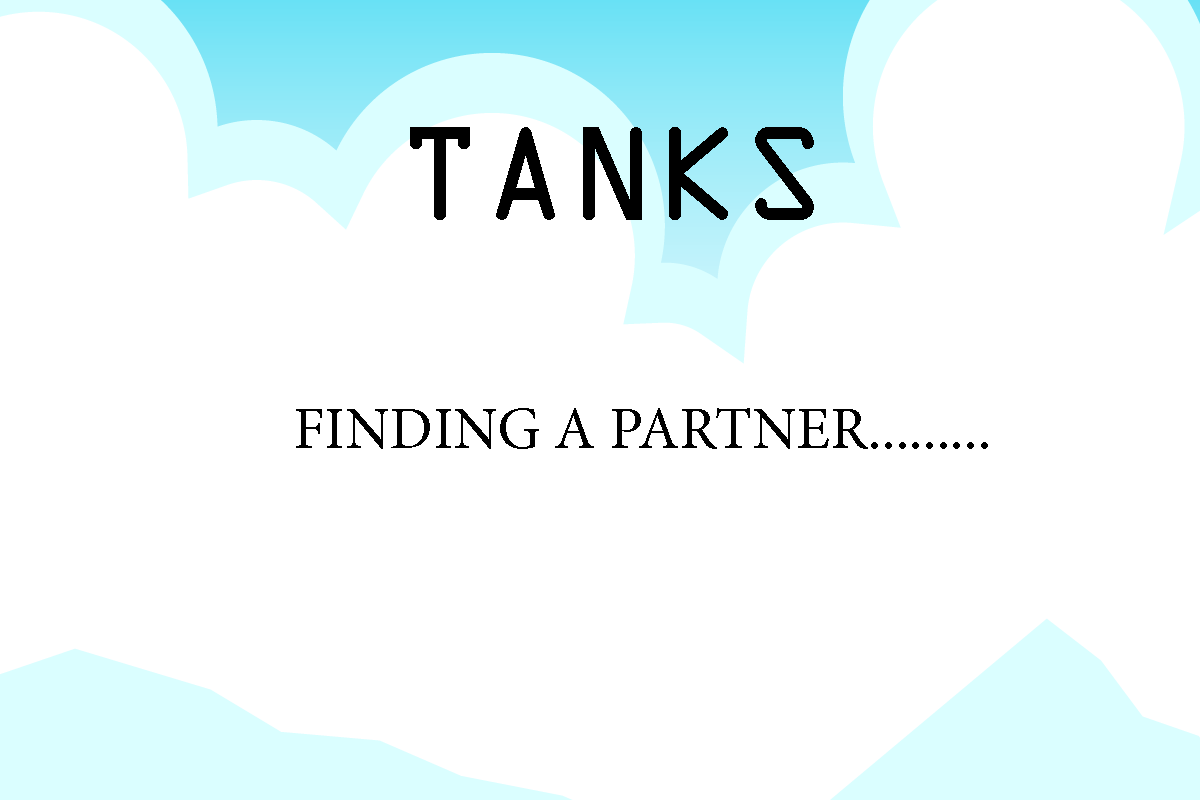
<style>
.page{position:relative;width:1200px;height:800px;background:#ffffff}
.page>*{position:absolute;margin:0}
.t1{font:120px "OCRAStd";color:#000000}
.t2{font:60px "MinionPro-Regular";color:#000000}
</style>
<div class="page">
<p class="t1" style="left:410px;top:127px;width:404px;height:93px">TANKS</p>
<p class="t2" style="left:296px;top:408px;width:692px;height:41px">FINDING A PARTNER.........</p>
</div>
